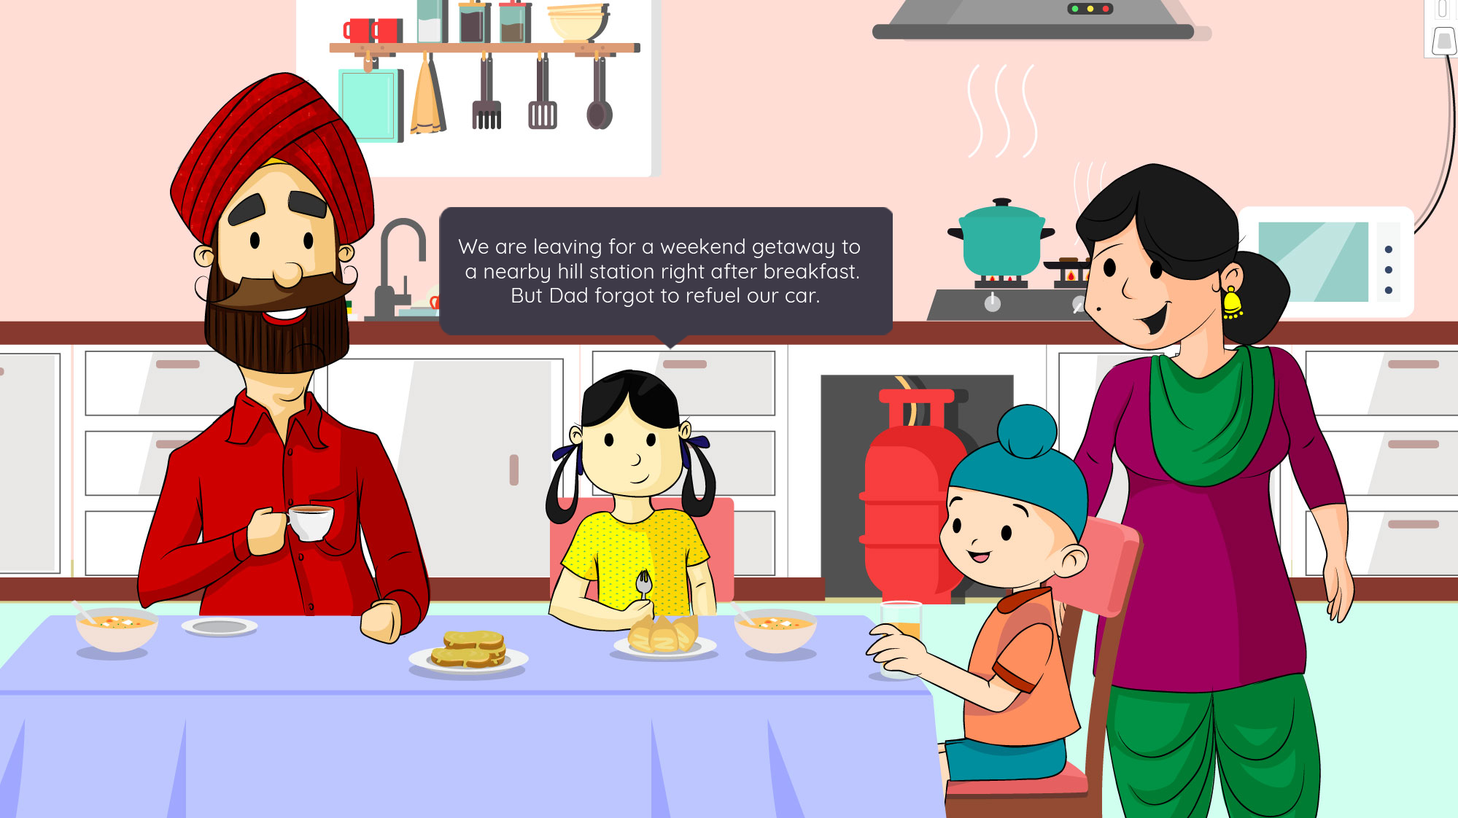
<style>
.page{position:relative;width:1458px;height:818px}
.page>*{position:absolute;margin:0}
.t1{font:20.4px "Quicksand-Regular";letter-spacing:0.01em;color:#ffffff}
</style>
<div class="page">
<p class="t1" style="left:458px;top:238px;width:402px;height:69px;text-align:center">We are leaving for a weekend getaway to <br>a nearby hill station right after breakfast.<br> But Dad forgot to refuel our car.</p>
</div>
